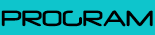
<style>
.page{position:relative;width:155px;height:35px;background:#0ec5cc}
.page>*{position:absolute;margin:0}
.t1{font:26px "Neuropol";color:#000000}
</style>
<div class="page">
<p class="t1" style="left:1px;top:10px;width:152px;height:17px">PROGRAM</p>
</div>
